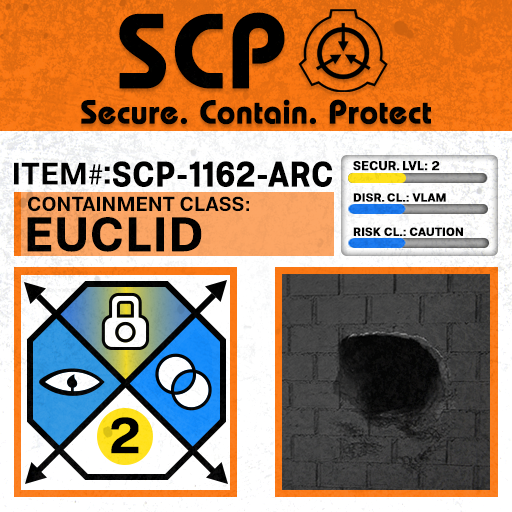
<style>
.page{position:relative;width:512px;height:512px}
.page>*{position:absolute;margin:0}
.t1{font:105.8px "BauhausLT-Demi";color:#000000;font-weight:bold}
.t2{font:33px "BauhausLT-Demi";color:#000000;font-weight:bold}
.t3{font:35.1px "Molde-Semibold";color:#000000;font-weight:bold;scale:0.88 1}
.t4{font:12.5px "Molde-Semibold";color:#000000;font-weight:bold}
.t5{font:31.1px "Molde-Semibold";color:#000000}
.t6{font:31.1px "MyriadPro-Regular";color:#000000}
.t7{font:34.5px "Molde-Semibold";color:#000000}
.t8{font:20.3px "Molde-Semibold";color:#000000}
.t9{font:11.7px "Molde-Semibold";color:#000000;font-weight:bold}
.t10{font:47.8px "Molde-Semibold";color:#000000;font-weight:bold}
</style>
<div class="page">
<p class="t1" style="left:119px;top:12px;width:166px;height:77px">SCP</p>
<p class="t2" style="left:81px;top:99px;width:350px;height:26px">Secure. Contain. Protect</p>
<p class="t3" style="left:113px;top:161px;width:219px;height:26px">SCP-1162-ARC</p>
<p class="t4" style="left:353px;top:161px;width:87px;height:10px">SECUR. LVL: 2</p>
<p class="t5" style="left:14px;top:162px;width:89px;height:23px">ITEM<span class="t6">#</span></p>
<p class="t7" style="left:104px;top:166px;width:6px;height:18px">:</p>
<p class="t8" style="left:28px;top:196px;width:221px;height:16px">CONTAINMENT CLASS:</p>
<p class="t9" style="left:353px;top:193px;width:93px;height:9px">DISR. CL.: VLAM</p>
<p class="t10" style="left:27px;top:217px;width:175px;height:35px">EUCLID</p>
<p class="t9" style="left:353px;top:227px;width:110px;height:9px">RISK CL.: CAUTION</p>
</div>
